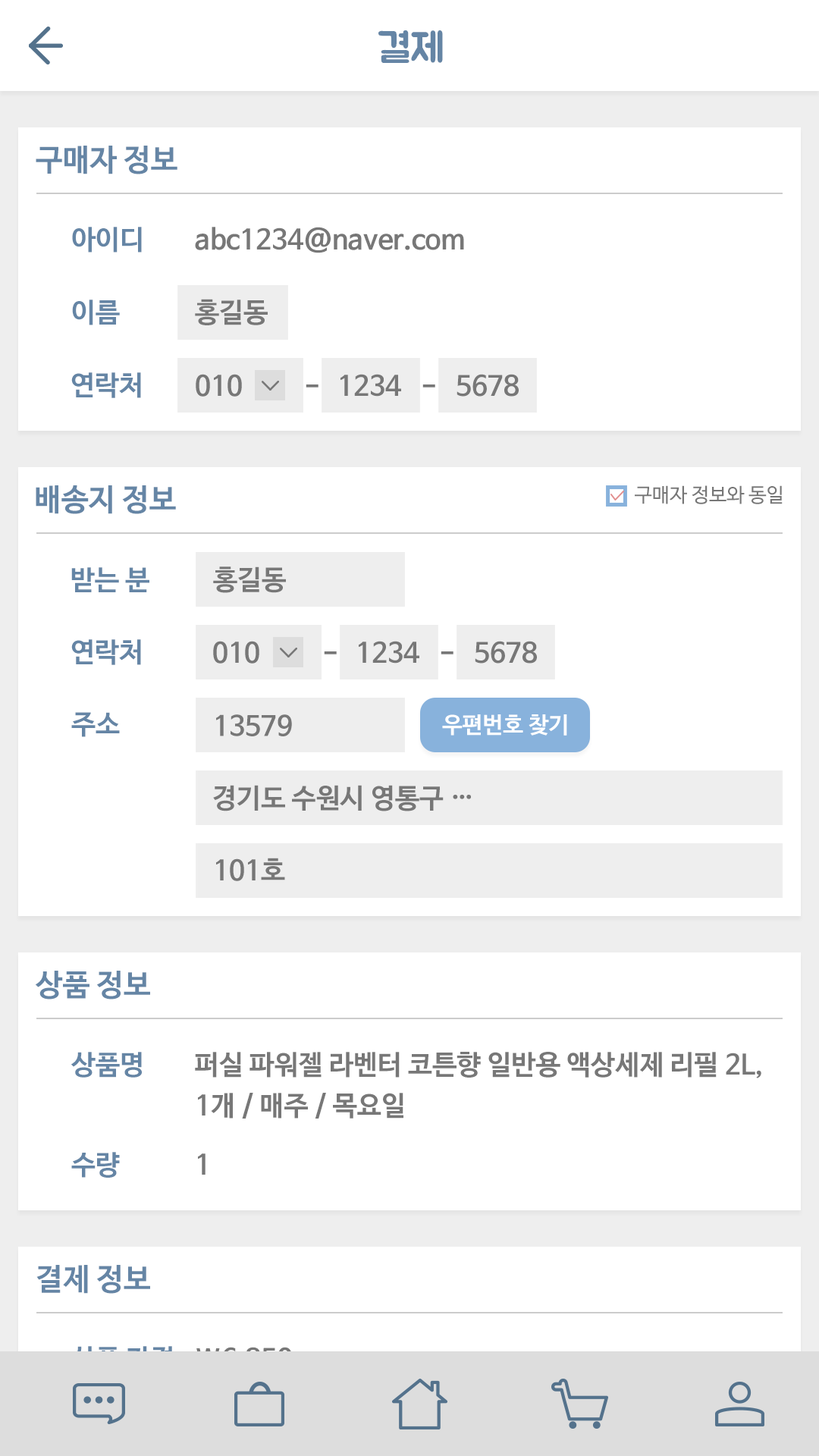
<style>
.page{position:relative;width:819px;height:1456px;background:#ffffff}
.page>*{position:absolute;margin:0}
.t1{font:40.9px "BMJUA";color:#6585a5}
.t2{font:30.3px "NanumBarunGothicBold";color:#6585a5}
.t3{font:27.3px "NanumBarunGothicBold";color:#6585a5}
.t4{font:27.3px "NanumBarunGothicBold";color:#777777}
.t5{font:19.7px "NanumBarunGothic";color:#777777}
.t6{font:22.7px "NanumBarunGothicBold";color:#ffffff}
.t7{font:27.3px/40.9px "NanumBarunGothicBold";color:#777777}
.t8{font:27.3px "NanumBarunGothicBold";color:#dddddd}
</style>
<div class="page">
<p class="t1" style="left:378px;top:30px;width:65px;height:33px">결제</p>
<p class="t2" style="left:36px;top:146px;width:141px;height:28px">구매자 정보</p>
<p class="t3" style="left:72px;top:227px;width:70px;height:26px">아이디</p>
<p class="t4" style="left:195px;top:227px;width:269px;height:26px">abc1234@naver.com</p>
<p class="t3" style="left:72px;top:300px;width:48px;height:25px">이름</p>
<p class="t4" style="left:195px;top:299px;width:73px;height:26px">홍길동</p>
<p class="t3" style="left:71px;top:372px;width:70px;height:26px">연락처</p>
<p class="t4" style="left:196px;top:374px;width:46px;height:23px">010</p>
<p class="t4" style="left:340px;top:374px;width:61px;height:23px">1234</p>
<p class="t4" style="left:457px;top:374px;width:62px;height:23px">5678</p>
<p class="t4" style="left:306px;top:384px;width:12px;height:4px">-</p>
<p class="t4" style="left:422px;top:384px;width:13px;height:4px">-</p>
<p class="t2" style="left:36px;top:485px;width:140px;height:29px">배송지 정보</p>
<p class="t5" style="left:635px;top:485px;width:148px;height:19px">구매자 정보와 동일</p>
<p class="t3" style="left:71px;top:567px;width:78px;height:25px">받는 분</p>
<p class="t4" style="left:213px;top:566px;width:73px;height:27px">홍길동</p>
<p class="t3" style="left:71px;top:639px;width:70px;height:26px">연락처</p>
<p class="t4" style="left:213px;top:641px;width:46px;height:23px">010</p>
<p class="t4" style="left:359px;top:641px;width:60px;height:23px">1234</p>
<p class="t4" style="left:475px;top:641px;width:62px;height:23px">5678</p>
<p class="t4" style="left:324px;top:651px;width:13px;height:3px">-</p>
<p class="t4" style="left:441px;top:651px;width:12px;height:3px">-</p>
<p class="t3" style="left:71px;top:712px;width:49px;height:25px">주소</p>
<p class="t4" style="left:216px;top:714px;width:76px;height:22px">13579</p>
<p class="t6" style="left:442px;top:714px;width:125px;height:22px">우편번호 찾기</p>
<p class="t4" style="left:213px;top:785px;width:258px;height:26px">경기도 수원시 영통구 …</p>
<p class="t4" style="left:216px;top:858px;width:69px;height:23px">101호</p>
<p class="t2" style="left:35px;top:971px;width:115px;height:28px">상품 정보</p>
<p class="t3" style="left:71px;top:1052px;width:71px;height:26px">상품명</p>
<p class="t7" style="left:195px;top:1052px;width:566px;height:67px">퍼실 파워젤 라벤터 코튼향 일반용 액상세제 리필 2L,<br>1개 / 매주 / 목요일</p>
<p class="t3" style="left:71px;top:1152px;width:49px;height:26px">수량</p>
<p class="t4" style="left:198px;top:1153px;width:8px;height:22px">1</p>
<p class="t2" style="left:36px;top:1265px;width:114px;height:29px">결제 정보</p>
<p class="t8" style="left:71px;top:1346px;width:101px;height:26px">상품 가격</p>
<p class="t8" style="left:196px;top:1347px;width:96px;height:26px">\6,850</p>
</div>
